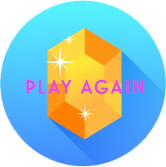
<style>
.page{position:relative;width:166px;height:167px;background:#ffffff}
.page>*{position:absolute;margin:0}
.t1{font:18px "Landmark-Inline";letter-spacing:0.1em;color:#e647e8;font-weight:bold}
</style>
<div class="page">
<p class="t1" style="left:26px;top:79px;width:117px;height:15px">PLAY AGAIN</p>
</div>
